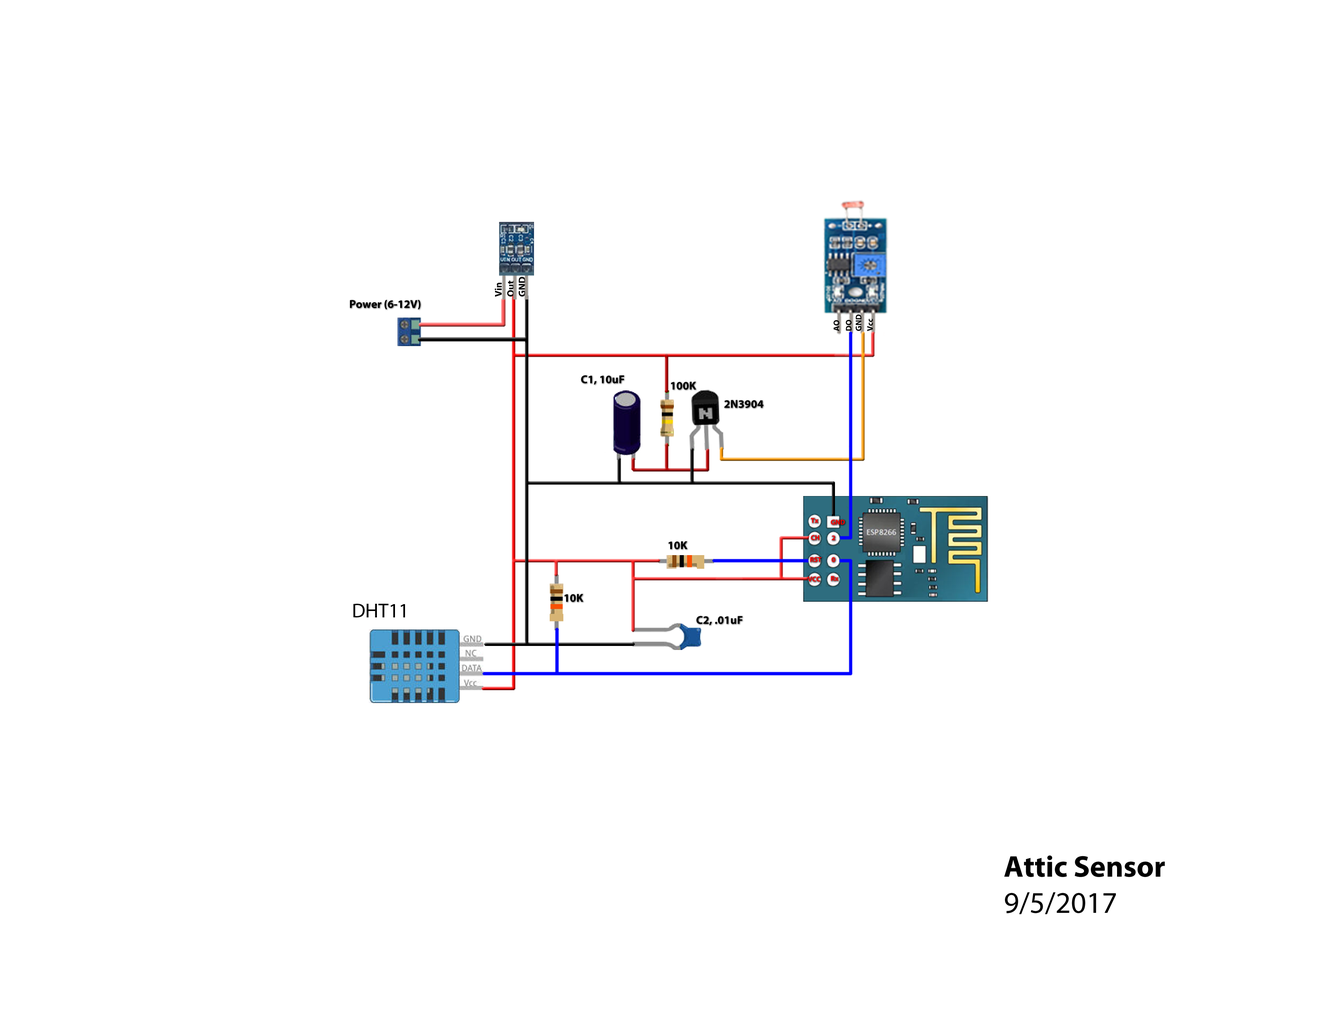
<style>
.page{position:relative;width:1326px;height:1025px;background:#ffffff}
.page>*{position:absolute;margin:0}
.t1{font:9.8px "MyriadPro-Bold";color:#000000}
.t2{font:11.5px "MyriadPro-Bold";color:#000000}
.t3{font:8.2px "MyriadPro-Bold";color:#000000}
.t4{font:7px "MyriadPro-Bold";color:#ff0000}
.t5{font:20.1px "MyriadPro-Regular";color:#000000}
.t6{font:30.1px "MyriadPro-Bold";color:#000000}
.t7{font:30.1px "MyriadPro-Regular";color:#000000}
</style>
<div class="page">
<p class="t1" style="left:507px;top:280px;width:7px;height:17px;rotate:-90deg">Out</p>
<p class="t1" style="left:518px;top:276px;width:8px;height:21px;rotate:-90deg">GND</p>
<p class="t1" style="left:495px;top:282px;width:7px;height:15px;rotate:-90deg">Vin</p>
<p class="t2" style="left:350px;top:300px;width:71px;height:9px">Power (6-12V)</p>
<p class="t3" style="left:856px;top:314px;width:6px;height:17px;rotate:-90deg">GND</p>
<p class="t3" style="left:833px;top:320px;width:6px;height:11px;rotate:-90deg">AO</p>
<p class="t3" style="left:846px;top:319px;width:6px;height:12px;rotate:-90deg">DO</p>
<p class="t3" style="left:867px;top:319px;width:6px;height:12px;rotate:-90deg">Vcc</p>
<p class="t2" style="left:581px;top:375px;width:43px;height:10px">C1, 10uF</p>
<p class="t2" style="left:671px;top:381px;width:25px;height:9px">100K</p>
<p class="t2" style="left:724px;top:400px;width:39px;height:8px">2N3904</p>
<p class="t4" style="left:811px;top:518px;width:8px;height:5px">Tx</p>
<p class="t4" style="left:831px;top:519px;width:14px;height:5px">GND</p>
<p class="t2" style="left:668px;top:541px;width:20px;height:8px">10K</p>
<p class="t4" style="left:811px;top:535px;width:8px;height:5px">CH</p>
<p class="t4" style="left:832px;top:535px;width:3px;height:5px">2</p>
<p class="t4" style="left:810px;top:557px;width:12px;height:5px">RST</p>
<p class="t4" style="left:831px;top:557px;width:4px;height:5px">0</p>
<p class="t4" style="left:808px;top:576px;width:13px;height:5px">VCC</p>
<p class="t4" style="left:831px;top:576px;width:8px;height:5px">Rx</p>
<p class="t2" style="left:564px;top:594px;width:19px;height:8px">10K</p>
<p class="t5" style="left:353px;top:604px;width:52px;height:13px">DHT11</p>
<p class="t2" style="left:696px;top:616px;width:47px;height:9px">C2, .01uF</p>
<p class="t6" style="left:1004px;top:855px;width:161px;height:59px">Attic Sensor<br><span class="t7">9/5/2017</span></p>
</div>
